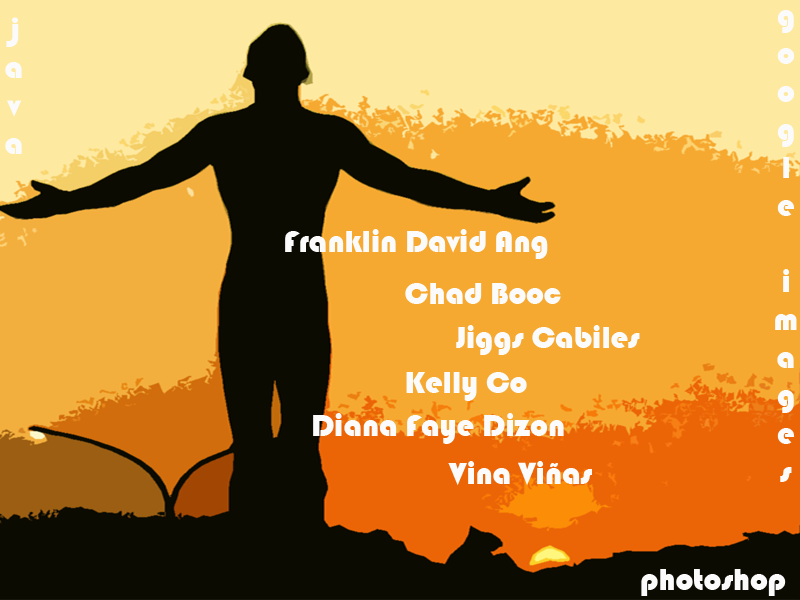
<style>
.page{position:relative;width:800px;height:600px;background:#f6a931}
.page>*{position:absolute;margin:0}
.t1{font:31.7px "Bauhaus93";color:#fcfbfb}
</style>
<div class="page">
<p class="t1" style="left:5px;top:17px;width:17px;height:137px;text-align:center">j<br>a<br>v<br>a</p>
<p class="t1" style="left:775px;top:10px;width:22px;height:472px;text-align:center">g<br>o<br>o<br>g<br>l<br>e<br><br>i<br>m<br>a<br>g<br>e<br>s</p>
<p class="t1" style="left:285px;top:229px;width:263px;height:30px">Franklin David Ang</p>
<p class="t1" style="left:405px;top:283px;width:156px;height:21px">Chad Booc</p>
<p class="t1" style="left:456px;top:325px;width:184px;height:30px">Jiggs Cabiles</p>
<p class="t1" style="left:406px;top:372px;width:121px;height:29px">Kelly Co</p>
<p class="t1" style="left:313px;top:413px;width:251px;height:31px">Diana Faye Dizon</p>
<p class="t1" style="left:448px;top:461px;width:144px;height:25px">Vina Viñas</p>
<p class="t1" style="left:641px;top:569px;width:145px;height:27px">photoshop</p>
</div>
